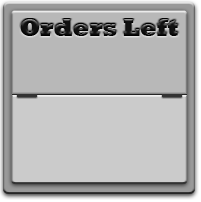
<style>
.page{position:relative;width:201px;height:202px;background:#cbcbcb}
.page>*{position:absolute;margin:0}
.t1{font:24px "Rockwell-ExtraBold";color:#111111}
</style>
<div class="page">
<p class="t1" style="left:20px;top:19px;width:158px;height:17px">Orders Left</p>
</div>
